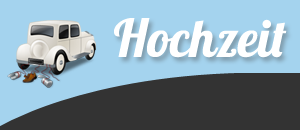
<style>
.page{position:relative;width:300px;height:130px;background:#a4d3ee}
.page>*{position:absolute;margin:0}
.t1{font:51.6px "Lobster1.4";color:#ffffff}
</style>
<div class="page">
<p class="t1" style="left:114px;top:18px;width:173px;height:40px">Hochzeit</p>
</div>
